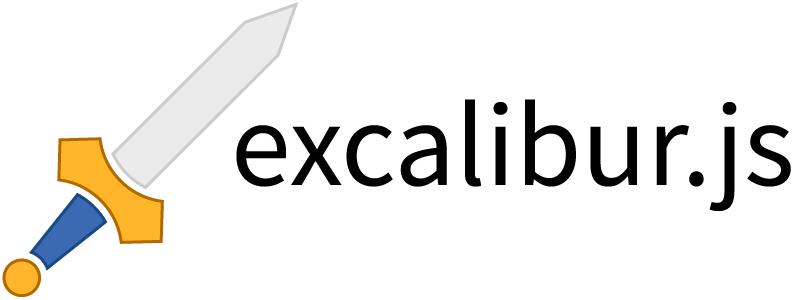
<style>
.page{position:relative;width:800px;height:300px;background:#ffffff}
.page>*{position:absolute;margin:0}
.t1{font:120px "SourceSansPro-Regular";color:#010101}
</style>
<div class="page">
<p class="t1" style="left:236px;top:99px;width:555px;height:112px">excalibur.js</p>
</div>
